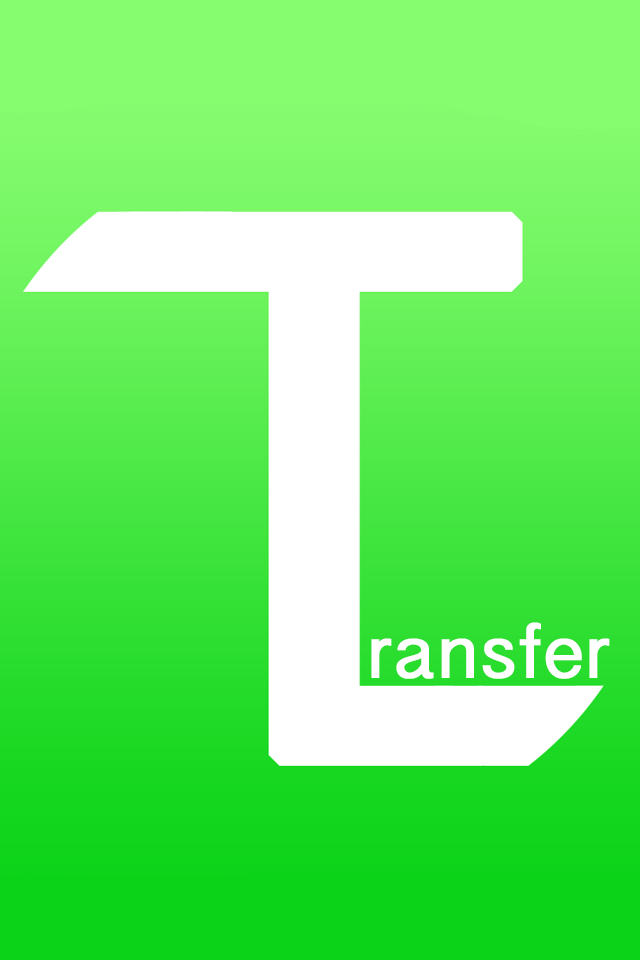
<style>
.page{position:relative;width:640px;height:960px}
.page>*{position:absolute;margin:0}
.t1{font:75px "DevanagariSangamMN";color:#ffffff;font-weight:bold}
</style>
<div class="page">
<p class="t1" style="left:371px;top:622px;width:239px;height:57px">ransfer</p>
</div>
